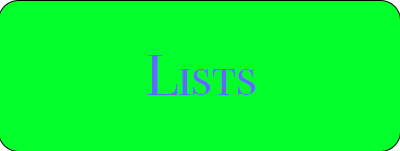
<style>
.page{position:relative;width:400px;height:151px;background:#02ff2c}
.page>*{position:absolute;margin:0}
.t1{font:56.5px "BodoniSvtyTwoSCITCTT-Book";color:#5f6aff}
</style>
<div class="page">
<p class="t1" style="left:147px;top:55px;width:109px;height:40px">Lists</p>
</div>
